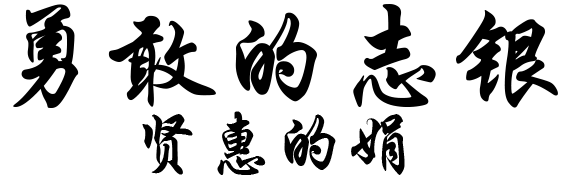
<style>
.page{position:relative;width:570px;height:180px;background:#ffffff}
.page>*{position:absolute;margin:0}
.t1{font:115px "STXingkai";color:#000000}
.t2{font:72px "STXingkai";color:#000000}
</style>
<div class="page">
<p class="t1" style="left:13px;top:4px;width:545px;height:104px">勇敢的志银</p>
<p class="t2" style="left:142px;top:111px;width:263px;height:64px">贤惠的娟</p>
</div>
